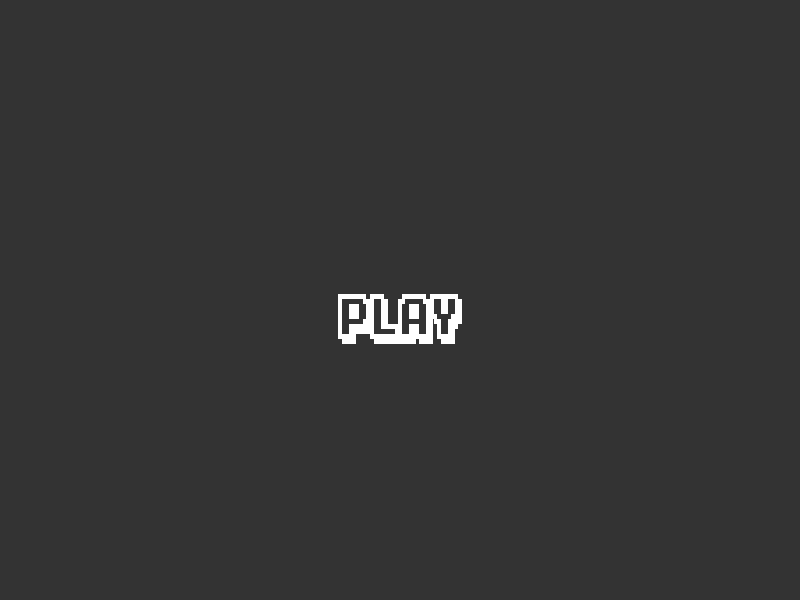
<style>
.page{position:relative;width:800px;height:600px;background:#333333}
.page>*{position:absolute;margin:0}
.t1{font:50.8px "KarmaticArcade";color:#ffffff;scale:0.71 1}
</style>
<div class="page">
<p class="t1" style="left:338px;top:294px;width:124px;height:50px">Play</p>
</div>
